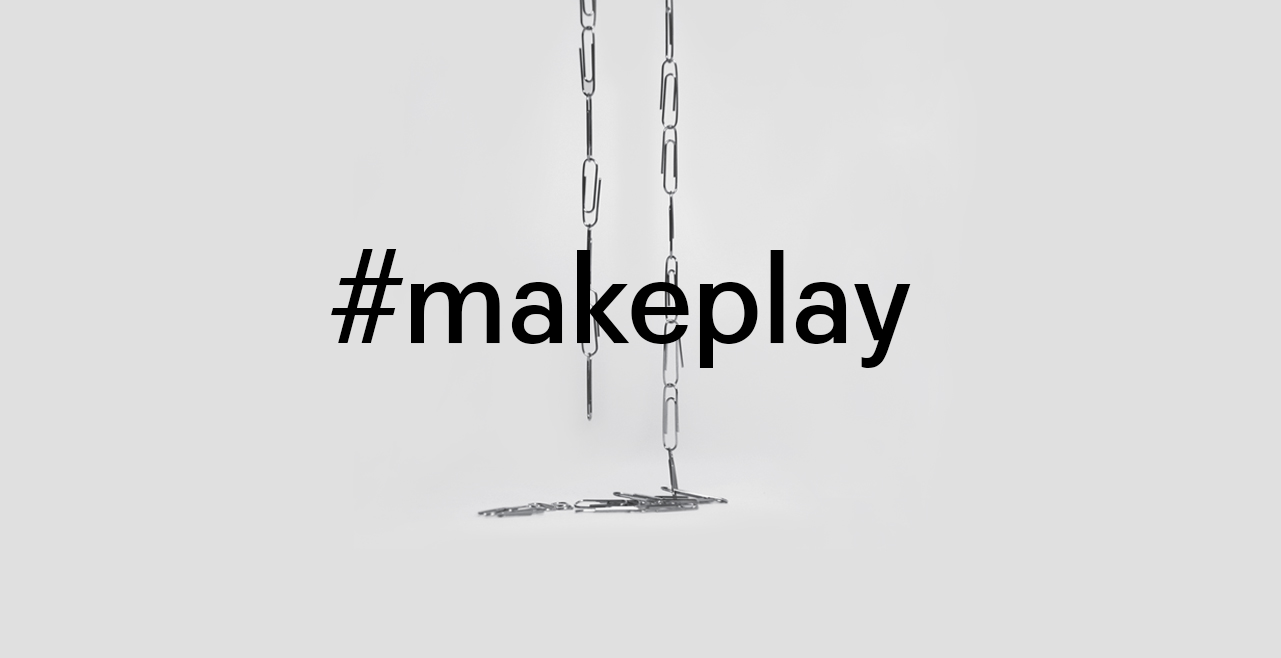
<style>
.page{position:relative;width:1281px;height:658px;background:#e0e0e0}
.page>*{position:absolute;margin:0}
.t1{font:130px "Recta-Medium";color:#000000}
.t2{font:130px "Helvetica";color:#000000}
</style>
<div class="page">
<p class="t1" style="left:331px;top:249px;width:580px;height:119px"><span class="t2">#</span>makeplay</p>
</div>
